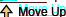
<style>
.page{position:relative;width:66px;height:17px;background:#ffffff}
.page>*{position:absolute;margin:0}
.t1{font:12px "ArialMT"}
</style>
<div class="page">
<p class="t1" style="left:19px;top:4px;width:47px;height:11px">Move Up</p>
</div>
